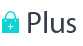
<style>
.page{position:relative;width:83px;height:46px;background:#ffffff}
.page>*{position:absolute;margin:0}
.t1{font:30px "MyriadPro-Regular";color:#35404f}
.t2{font:10px "MyriadPro-Regular";color:#fefefe}
</style>
<div class="page">
<p class="t1" style="left:28px;top:11px;width:48px;height:22px">Plus</p>
<p class="t2" style="left:7px;top:23px;width:7px;height:7px">+</p>
</div>
